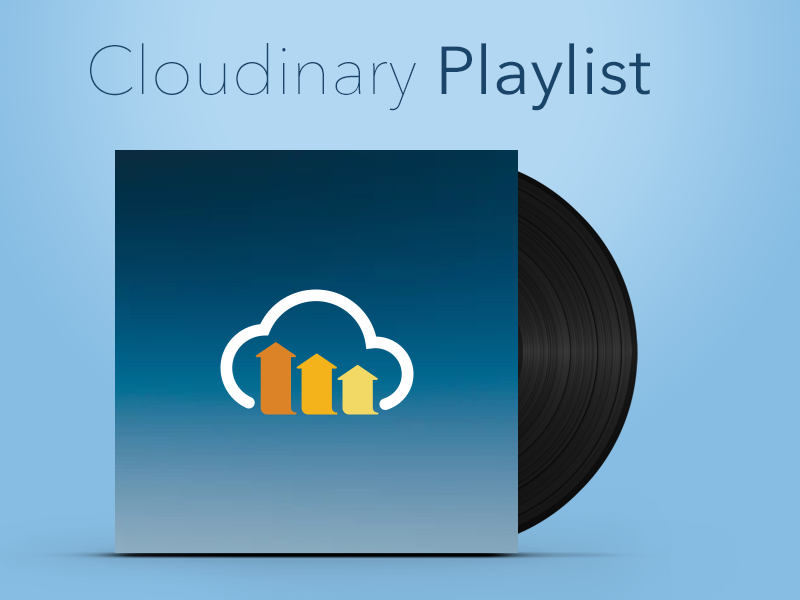
<style>
.page{position:relative;width:800px;height:600px}
.page>*{position:absolute;margin:0}
.t1{font:67.2px "AvenirNext-UltraLight";color:#19456b}
.t2{font:67.2px "AvenirNext-Regular";color:#19456b}
</style>
<div class="page">
<p class="t1" style="left:90px;top:43px;width:560px;height:68px">Cloudinary <span class="t2">Playlist</span></p>
</div>
